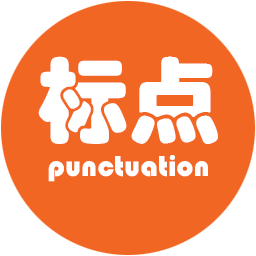
<style>
.page{position:relative;width:256px;height:256px;background:#f26623}
.page>*{position:absolute;margin:0}
.t1{font:92px "STHupo";color:#ffffff}
.t2{font:30px "STHupo";color:#ffffff}
</style>
<div class="page">
<p class="t1" style="left:38px;top:56px;width:180px;height:88px">标点</p>
<p class="t2" style="left:48px;top:155px;width:160px;height:27px">punctuation</p>
</div>
